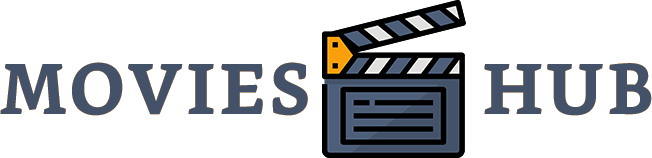
<style>
.page{position:relative;width:652px;height:158px;background:#ffffff}
.page>*{position:absolute;margin:0}
.t1{font:72.1px "Bookerly-Bold";color:#435269;text-transform:uppercase}
</style>
<div class="page">
<p class="t1" style="left:0px;top:62px;width:308px;height:54px">Movies</p>
<p class="t1" style="left:0px;top:62px;width:308px;height:54px">Movies</p>
<p class="t1" style="left:484px;top:63px;width:168px;height:53px">hub</p>
<p class="t1" style="left:484px;top:63px;width:168px;height:53px">hub</p>
</div>
